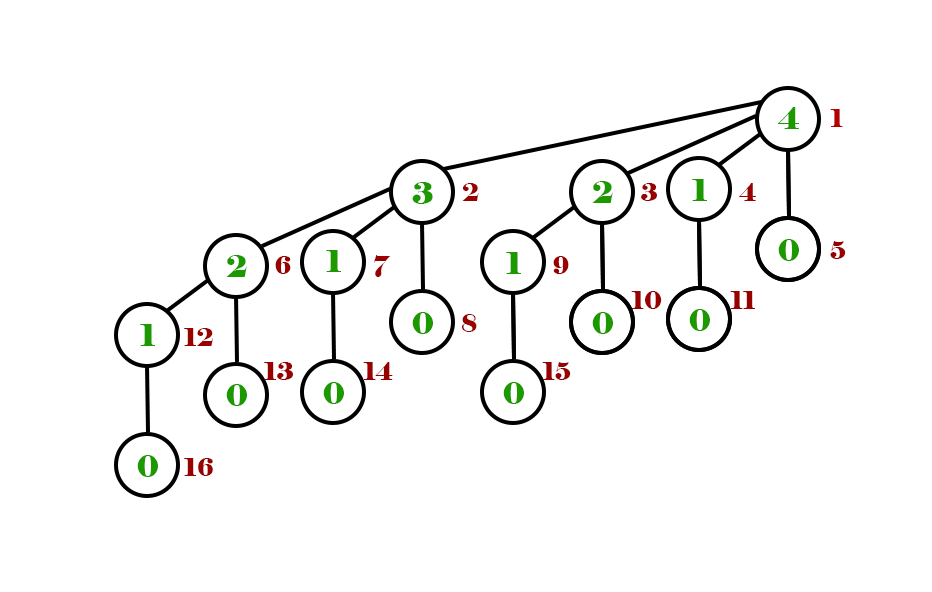
<style>
.page{position:relative;width:932px;height:592px;background:#ffffff}
.page>*{position:absolute;margin:0}
.t1{font:30px "Elephant-Regular";color:#1d9900}
.t2{font:24px "Elephant-Regular";color:#b50000}
.t3{font:24px "Elephant-Regular";color:#990000}
</style>
<div class="page">
<p class="t1" style="left:778px;top:107px;width:21px;height:22px">4</p>
<p class="t2" style="left:830px;top:109px;width:13px;height:18px">1</p>
<p class="t1" style="left:412px;top:182px;width:21px;height:22px">3</p>
<p class="t3" style="left:462px;top:183px;width:17px;height:18px">2</p>
<p class="t1" style="left:592px;top:181px;width:21px;height:22px">2</p>
<p class="t3" style="left:641px;top:183px;width:16px;height:18px">3</p>
<p class="t1" style="left:692px;top:179px;width:15px;height:22px">1</p>
<p class="t3" style="left:739px;top:183px;width:17px;height:18px">4</p>
<p class="t1" style="left:778px;top:239px;width:21px;height:22px">0</p>
<p class="t3" style="left:830px;top:241px;width:16px;height:18px">5</p>
<p class="t1" style="left:226px;top:255px;width:21px;height:22px">2</p>
<p class="t3" style="left:275px;top:256px;width:16px;height:18px">6</p>
<p class="t1" style="left:326px;top:250px;width:15px;height:22px">1</p>
<p class="t3" style="left:373px;top:255px;width:18px;height:22px">7</p>
<p class="t1" style="left:506px;top:252px;width:15px;height:22px">1</p>
<p class="t3" style="left:553px;top:256px;width:16px;height:18px">9</p>
<p class="t3" style="left:631px;top:291px;width:31px;height:18px">10</p>
<p class="t3" style="left:730px;top:291px;width:25px;height:18px">11</p>
<p class="t1" style="left:412px;top:312px;width:21px;height:22px">0</p>
<p class="t3" style="left:462px;top:314px;width:15px;height:18px">8</p>
<p class="t1" style="left:592px;top:312px;width:21px;height:22px">0</p>
<p class="t1" style="left:689px;top:309px;width:21px;height:22px">0</p>
<p class="t1" style="left:140px;top:324px;width:15px;height:22px">1</p>
<p class="t3" style="left:184px;top:328px;width:29px;height:18px">12</p>
<p class="t3" style="left:264px;top:362px;width:29px;height:18px">13</p>
<p class="t3" style="left:363px;top:362px;width:30px;height:18px">14</p>
<p class="t3" style="left:542px;top:362px;width:29px;height:18px">15</p>
<p class="t1" style="left:226px;top:384px;width:21px;height:22px">0</p>
<p class="t1" style="left:323px;top:382px;width:21px;height:22px">0</p>
<p class="t1" style="left:503px;top:382px;width:21px;height:22px">0</p>
<p class="t1" style="left:137px;top:455px;width:21px;height:22px">0</p>
<p class="t3" style="left:184px;top:458px;width:29px;height:18px">16</p>
</div>
